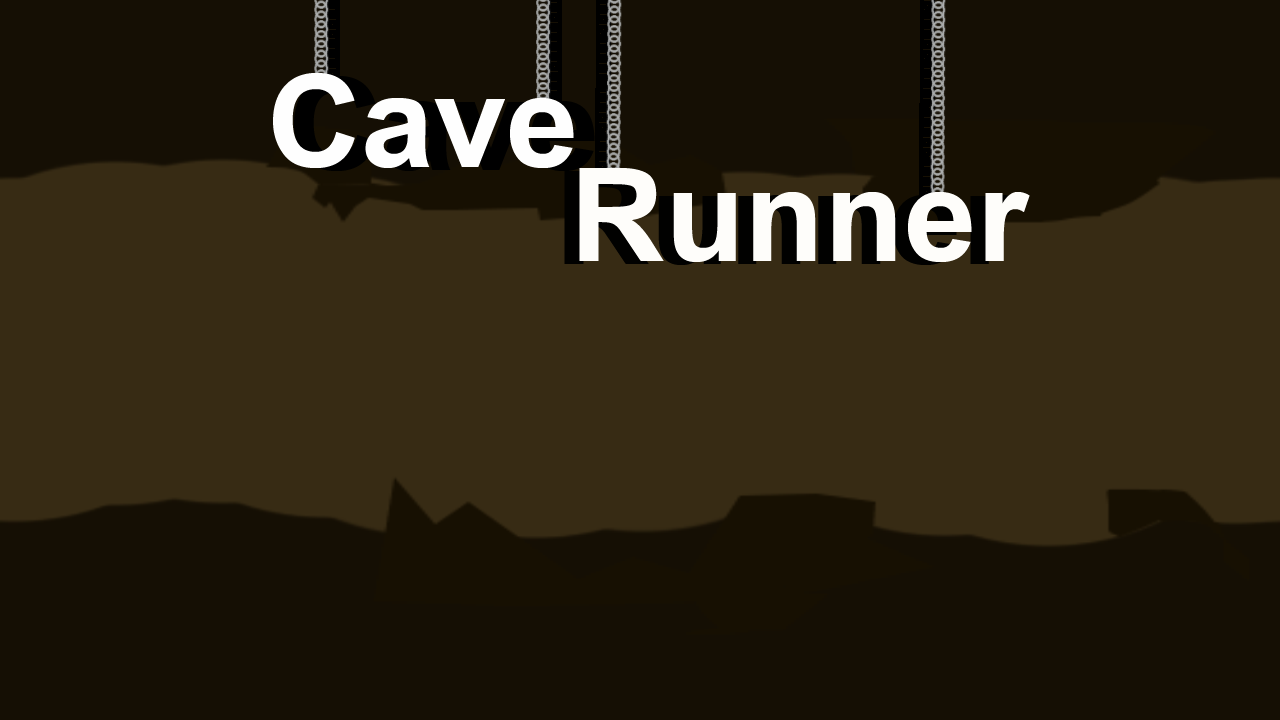
<style>
.page{position:relative;width:1280px;height:720px;background:#372b14}
.page>*{position:absolute;margin:0}
.t1{font:200px "BrowalliaUPC-Bold";color:#fefefe}
.t2{font:200px "BrowalliaUPC-Bold";color:#fefdfa}
</style>
<div class="page">
<p class="t1" style="left:273px;top:73px;width:301px;height:95px">Cave</p>
<p class="t2" style="left:579px;top:168px;width:451px;height:94px;text-align:center">Runner<br>r</p>
</div>
